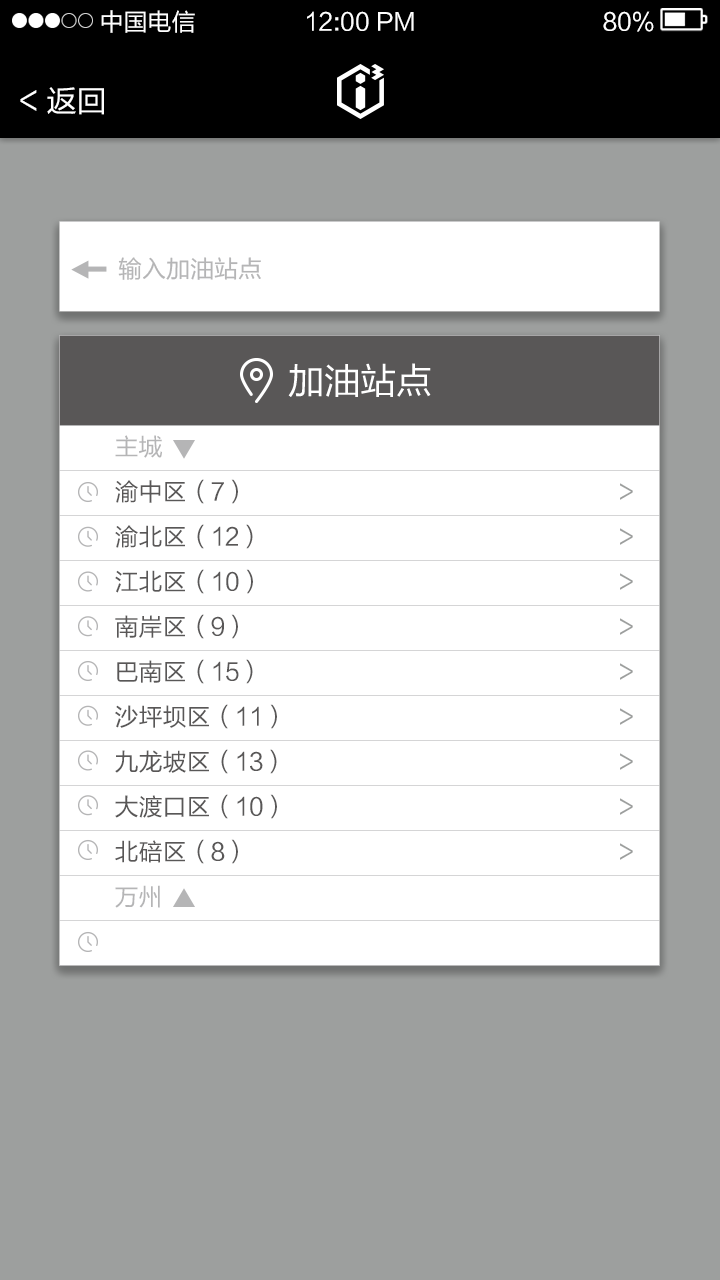
<style>
.page{position:relative;width:720px;height:1280px;background:#9d9f9e}
.page>*{position:absolute;margin:0}
.t1{font:24px "FZLTHK--GBK1-0";color:#ffffff}
.t2{font:30px "FZLTHK--GBK1-0";color:#ffffff}
.t3{font:24px/45px "FZLTHK--GBK1-0";color:#595757}
.t4{font:24px/45px "FZLTHK--GBK1-0";color:#b5b5b6}
.t5{font:24px/45px "FZLTHK--GBK1-0";color:#9d9f9e}
</style>
<div class="page">
<p class="t1" style="left:101px;top:10px;width:94px;height:23px">中国电信</p>
<p class="t1" style="left:307px;top:11px;width:107px;height:20px">12:00 PM</p>
<p class="t1" style="left:603px;top:11px;width:51px;height:21px">80%</p>
<p class="t2" style="left:20px;top:87px;width:84px;height:28px">&lt; 返回</p>
<p class="t3" style="left:115px;top:435px;width:518px;height:473px"><span class="t4">主城<br></span>渝中区（7）           <span class="t5">&gt;<br></span>渝北区（12）          <span class="t5">&gt;<br></span>江北区（10）          <span class="t5">&gt;<br></span>南岸区（9）           <span class="t5">&gt;<br></span>巴南区（15）          <span class="t5">&gt;<br></span>沙坪坝区（11）          <span class="t5">&gt;<br></span>九龙坡区（13）          <span class="t5">&gt;<br></span>大渡口区（10）          <span class="t5">&gt;<br></span>北碚区（8）           <span class="t5">&gt;<br></span><span class="t4">万州</span></p>
</div>
